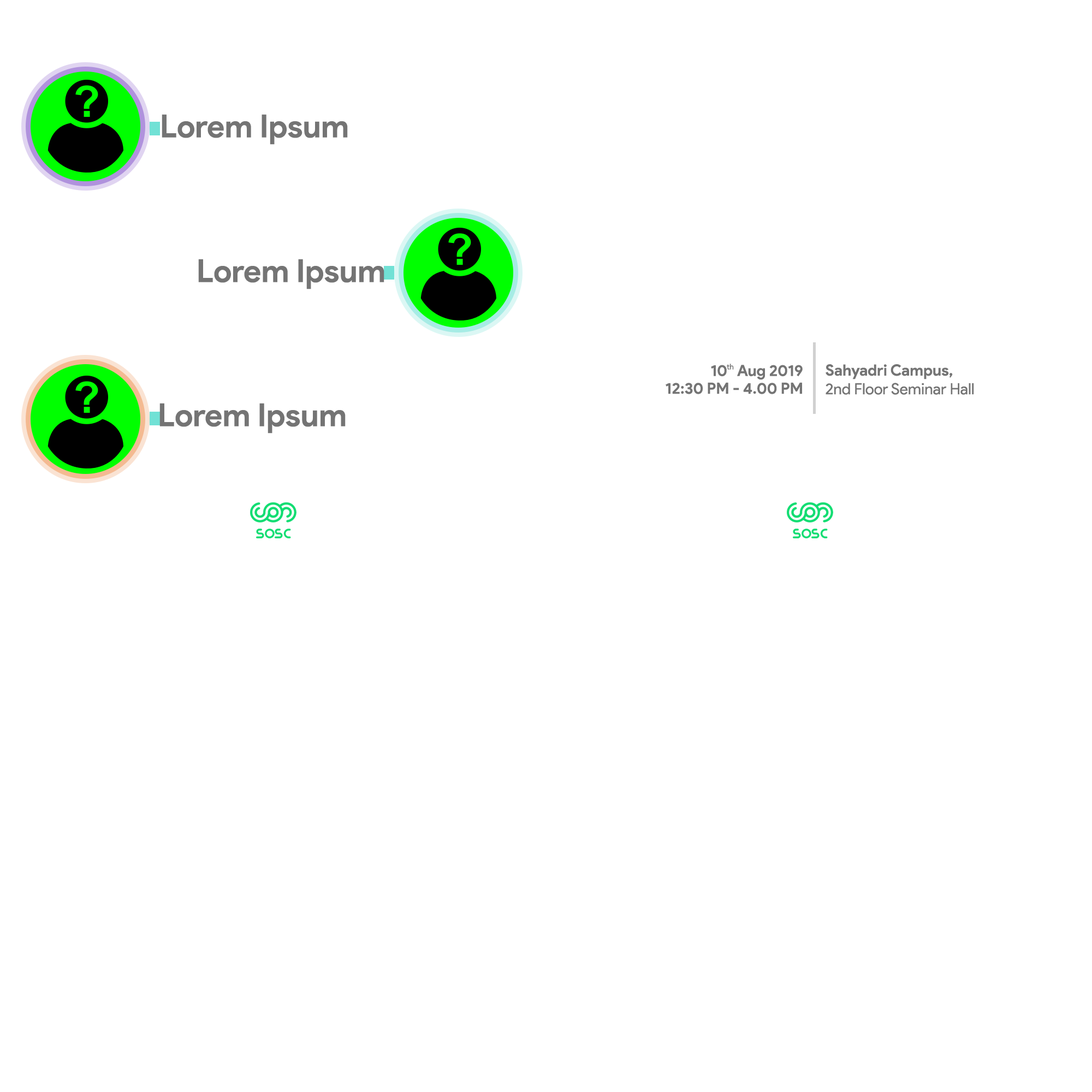
<style>
.page{position:relative;width:1092px;height:1092px;background:#ffffff}
.page>*{position:absolute;margin:0}
.t1{font:31.8px "ProductSans-Bold";color:#747474}
.t2{font:15.5px/8.5px "ProductSans-Bold";color:#747474}
.t3{font:7.7px "ProductSans-Regular";color:#747474}
.t4{font:15.5px/8.5px "ProductSans-Regular";color:#747474}
</style>
<div class="page">
<p class="t1" style="left:162px;top:114px;width:186px;height:31px">Lorem Ipsum</p>
<p class="t1" style="left:198px;top:259px;width:186px;height:30px">Lorem Ipsum</p>
<p class="t2" style="left:666px;top:365px;width:137px;height:29px;text-align:right">10   Aug 2019<br>12:30 PM - 4.00 PM</p>
<p class="t3" style="left:727px;top:364px;width:7px;height:6px">th</p>
<p class="t4" style="left:826px;top:364px;width:148px;height:31px"><span class="t2">Sahyadri Campus,<br></span>2nd Floor Seminar Hall</p>
<p class="t1" style="left:159px;top:403px;width:187px;height:31px">Lorem Ipsum</p>
</div>
